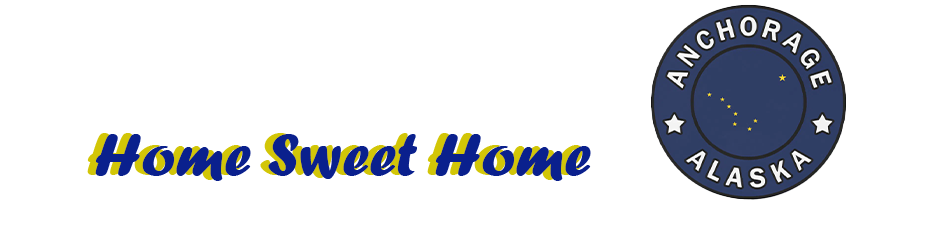
<style>
.page{position:relative;width:950px;height:250px;background:#ffffff}
.page>*{position:absolute;margin:0}
.t1{font:62.9px "ForteMT"}
.t2{font:62.9px "ForteMT";color:#0a208d}
</style>
<div class="page">
<p class="t1" style="left:87px;top:133px;width:496px;height:47px">Home Sweet Home</p>
<p class="t2" style="left:95px;top:134px;width:496px;height:47px">Home Sweet Home</p>
</div>
